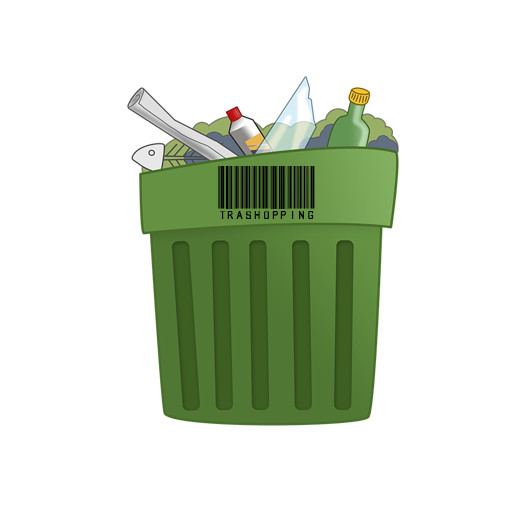
<style>
.page{position:relative;width:525px;height:524px;background:#ffffff}
.page>*{position:absolute;margin:0}
.t1{font:52.9px "barcodefont";color:#000000}
</style>
<div class="page">
<p class="t1" style="left:218px;top:166px;width:97px;height:53px">Trashopping</p>
</div>
